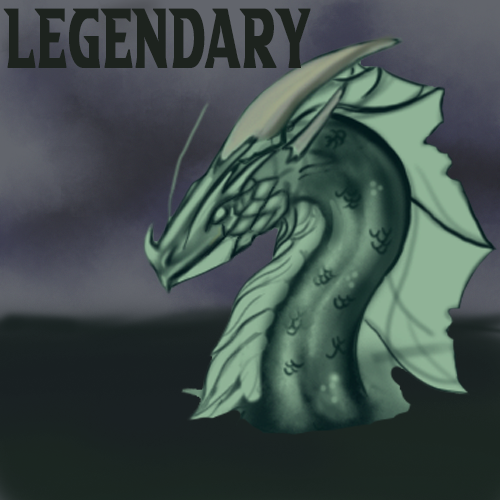
<style>
.page{position:relative;width:500px;height:500px}
.page>*{position:absolute;margin:0}
.t1{font:78.7px "aAbsoluteEmpire";letter-spacing:0.01em;color:#1d231e;font-weight:bold;scale:0.59 1}
</style>
<div class="page">
<p class="t1" style="left:3px;top:8px;width:308px;height:60px">Legendary</p>
</div>
